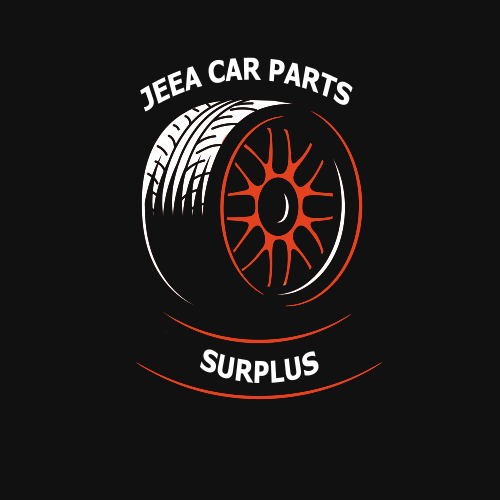
<style>
.page{position:relative;width:500px;height:500px;background:#111111}
.page>*{position:absolute;margin:0}
.t1{font:30.3px "Tahoma-Bold";color:#ffffff;scale:0.76 1}
</style>
<div class="page">
<p class="t1" style="left:140px;top:57px;width:213px;height:55px">JEEA CAR PARTS</p>
<p class="t1" style="left:200px;top:349px;width:119px;height:34px">SURPLUS</p>
</div>
